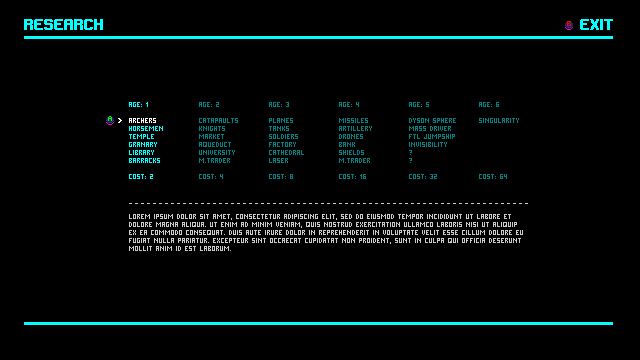
<style>
.page{position:relative;width:640px;height:360px;background:#000000}
.page>*{position:absolute;margin:0}
.t1{font:12px "Gameplay";color:#00ffff;text-transform:uppercase;font-weight:bold}
.t2{font:8px/8px "PixelMillennium";color:#00ffff;text-transform:uppercase}
.t3{font:8px/8px "PixelMillennium";color:#ffffff;text-transform:uppercase}
.t4{font:8px/8px "PixelMillennium";color:#008080;text-transform:uppercase}
.t5{font:8px/8px "PixelMillennium";color:#cdcccc;text-transform:uppercase}
</style>
<div class="page">
<p class="t1" style="left:24px;top:19px;width:79px;height:11px">research</p>
<p class="t1" style="left:24px;top:19px;width:79px;height:11px">research</p>
<p class="t1" style="left:580px;top:19px;width:33px;height:11px">exit</p>
<p class="t2" style="left:129px;top:102px;width:34px;height:77px">age: 1<br><br><span class="t3">archers<br></span>horsemen<br>temple<br>granary<br>library<br>barracks<br><br>cost: 2</p>
<p class="t4" style="left:199px;top:102px;width:39px;height:77px">age: 2<br><br>catapaults<br>knights<br>market<br>aqueduct<br>university<br>m.trader<br><br>cost: 4</p>
<p class="t4" style="left:269px;top:102px;width:35px;height:77px">age: 3<br><br>planes<br>tanks<br>soldiers<br>factory<br>cathedral<br>laser<br><br>cost: 8</p>
<p class="t4" style="left:339px;top:102px;width:33px;height:77px">age: 4<br><br>missiles<br>artillery<br>drones<br>bank<br>shields<br>m.trader<br><br>cost: 16</p>
<p class="t4" style="left:409px;top:102px;width:47px;height:77px">age: 5<br><br>dyson sphere<br>mass driver<br>ftl jumpship<br>invisibility<br>?<br>?<br><br>cost: 32</p>
<p class="t4" style="left:479px;top:102px;width:40px;height:77px">age: 6<br><br>singularity<br><br><br><br><br><br><br>cost: 64</p>
<p class="t5" style="left:129px;top:214px;width:394px;height:37px">Lorem ipsum dolor sit amet, consectetur adipiscing elit, sed do eiusmod tempor incididunt ut labore et dolore magna aliqua. Ut enim ad minim veniam, quis nostrud exercitation ullamco laboris nisi ut aliquip ex ea commodo consequat. Duis aute irure dolor in reprehenderit in voluptate velit esse cillum dolore eu fugiat nulla pariatur. Excepteur sint occaecat cupidatat non proident, sunt in culpa qui officia deserunt mollit anim id est laborum.</p>
</div>
